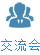
<style>
.page{position:relative;width:40px;height:55px;background:#ffffff}
.page>*{position:absolute;margin:0}
.t1{font:22.5px "SimSun";letter-spacing:0.075em;color:#4788b2;font-variant:small-caps}
</style>
<div class="page">
<p class="t1" style="left:1px;top:39px;width:39px;height:12px">交流会</p>
</div>
